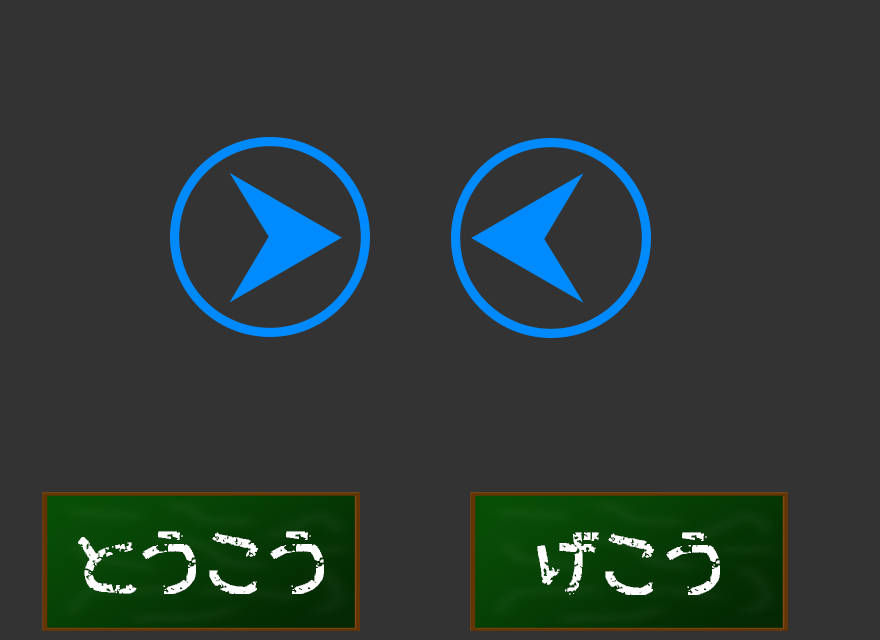
<style>
.page{position:relative;width:880px;height:640px;background:#333333}
.page>*{position:absolute;margin:0}
.t1{font:64px "FontFace";color:#ffffff}
</style>
<div class="page">
<p class="t1" style="left:78px;top:531px;width:246px;height:63px">とうこう</p>
<p class="t1" style="left:537px;top:532px;width:183px;height:63px">げこう</p>
</div>
